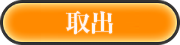
<style>
.page{position:relative;width:180px;height:45px;background:#ff8a00}
.page>*{position:absolute;margin:0}
.t1{font:25px "RyuminPr6N-ExBold";color:#fff6f3}
</style>
<div class="page">
<p class="t1" style="left:66px;top:11px;width:47px;height:24px">取出</p>
</div>
